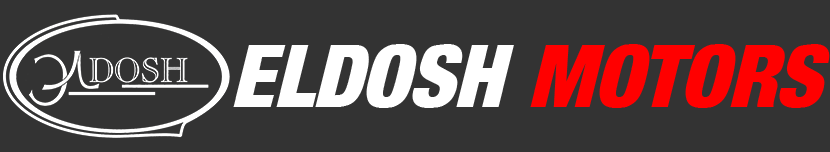
<style>
.page{position:relative;width:830px;height:152px;background:#333333}
.page>*{position:absolute;margin:0}
.t1{font:86px "BasicSansHeavySF-BoldItalic";color:#ffffff}
.t2{font:86px "BasicSansHeavySF-BoldItalic";color:#ff0000}
</style>
<div class="page">
<p class="t1" style="left:233px;top:44px;width:597px;height:64px">ELDOSH <span class="t2">MOTORS</span></p>
</div>
